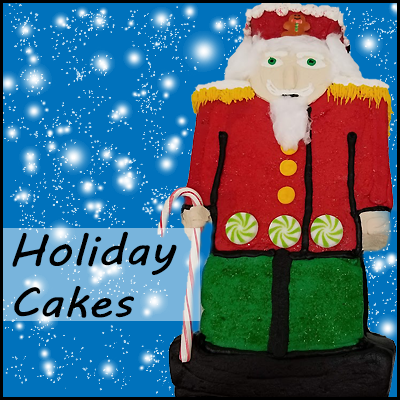
<style>
.page{position:relative;width:400px;height:400px;background:#0072bc}
.page>*{position:absolute;margin:0}
.t1{font:43.3px "MVBoli";letter-spacing:0.005em;color:#000000;scale:1.15 1}
</style>
<div class="page">
<p class="t1" style="left:12px;top:231px;width:165px;height:87px">Holiday <br>Cakes</p>
</div>
